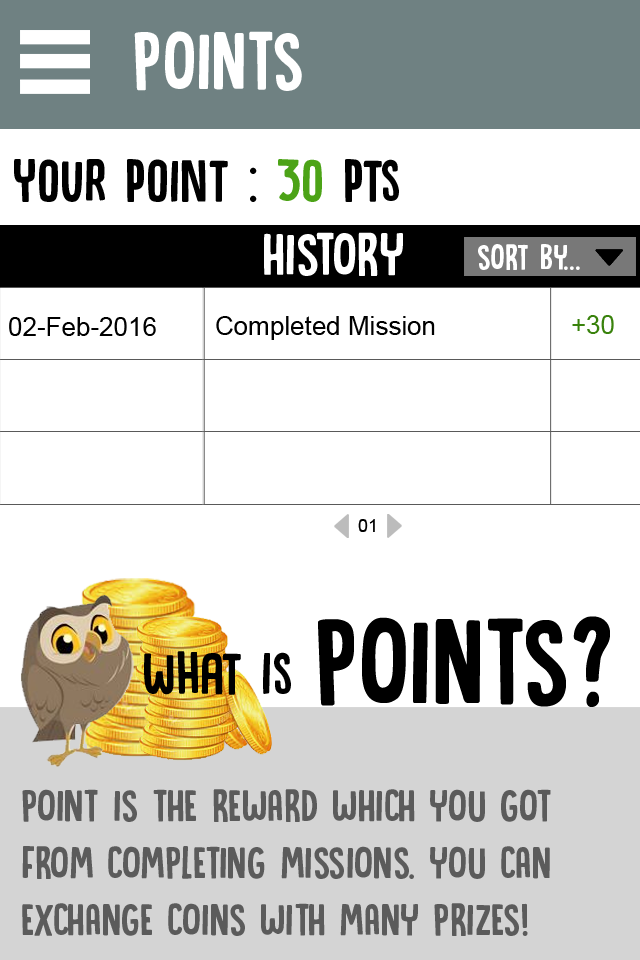
<style>
.page{position:relative;width:640px;height:960px;background:#ffffff}
.page>*{position:absolute;margin:0}
.t1{font:86.6px "DKCanoodle-Regular";color:#ffffff}
.t2{font:62.6px "DKCanoodle-Regular";color:#000000}
.t3{font:62.6px "DKCanoodle-Regular";color:#4ca317}
.t4{font:62.6px "DKCanoodle-Regular";color:#ffffff}
.t5{font:37.2px "DKCanoodle-Regular";color:#ffffff}
.t6{font:26px "ArialMT";color:#000000}
.t7{font:26px "ArialMT";color:#39820c}
.t8{font:17.7px "ArialMT";color:#000000}
.t9{font:128.2px "DKCanoodle-Regular";color:#000000}
.t10{font:62.7px "DKCanoodle-Regular";color:#000000}
.t11{font:47.4px "DKCanoodle-Regular";color:#5b5b5b}
</style>
<div class="page">
<p class="t1" style="left:134px;top:31px;width:168px;height:60px">POINTS</p>
<p class="t2" style="left:14px;top:159px;width:385px;height:43px">your point : <span class="t3">30</span> pts</p>
<p class="t4" style="left:264px;top:232px;width:139px;height:44px">HISTORY</p>
<p class="t5" style="left:478px;top:244px;width:102px;height:26px">SORT BY...</p>
<p class="t6" style="left:9px;top:317px;width:147px;height:19px">02-Feb-2016</p>
<p class="t6" style="left:216px;top:316px;width:219px;height:24px">Completed Mission</p>
<p class="t7" style="left:572px;top:315px;width:42px;height:19px">+30</p>
<p class="t8" style="left:358px;top:519px;width:17px;height:13px">01</p>
<p class="t9" style="left:318px;top:616px;width:292px;height:91px">POINTS?</p>
<p class="t10" style="left:144px;top:651px;width:147px;height:44px">what is</p>
<p class="t11" style="left:22px;top:789px;width:529px;height:147px">POINT IS THE REWARD WHICH YOU GOT <br>FROM COMPLETING MISSIONS. YOU CAN <br>EXCHANGE COINS WITH MANY PRIZES!</p>
</div>
